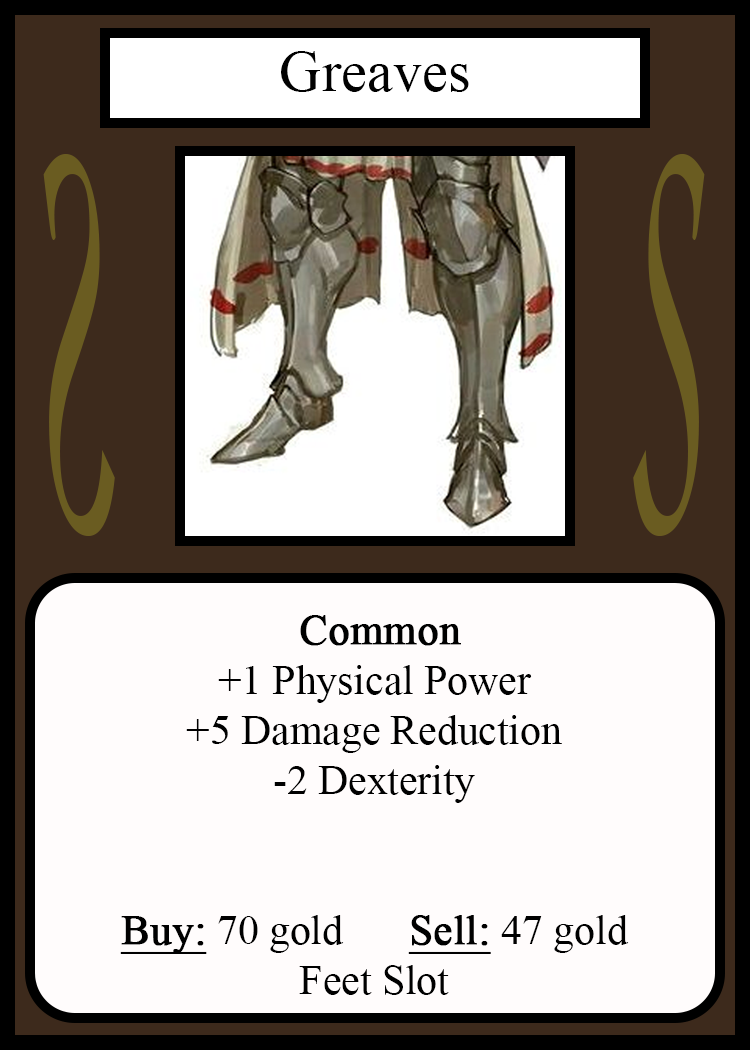
<style>
.page{position:relative;width:750px;height:1050px;background:#fffcfc}
.page>*{position:absolute;margin:0}
.t1{font:58.3px "TimesNewRomanPSMT";color:#010101}
.t2{font:548.5px "Apple-Chancery";color:#6a5c21;scale:0.27 1}
.t3{font:548.2px "Apple-Chancery";color:#6a5c21;scale:0.27 1}
.t4{font:41.7px "TimesNewRomanPSMT";color:#000000}
.t5{font:41.7px "TimesNewRomanPSMT";color:#000000;font-weight:bold}
.t6{font:41.7px "TimesNewRomanPSMT";color:#000000;font-weight:bold;text-decoration:underline}
</style>
<div class="page">
<p class="t1" style="left:281px;top:51px;width:188px;height:41px">Greaves</p>
<p class="t2" style="left:43px;top:154px;width:72px;height:382px;rotate:180deg">S</p>
<p class="t3" style="left:633px;top:154px;width:72px;height:382px">S</p>
<p class="t4" style="left:120px;top:615px;width:509px;height:380px;text-align:center"><span class="t5"> Common<br></span>+1 Physical Power<br>+5 Damage Reduction<br>-2 Dexterity<br><br><br><span class="t6">Buy:</span> 70 gold   <span class="t6">Sell:</span> 47 gold<br>Feet Slot</p>
</div>
